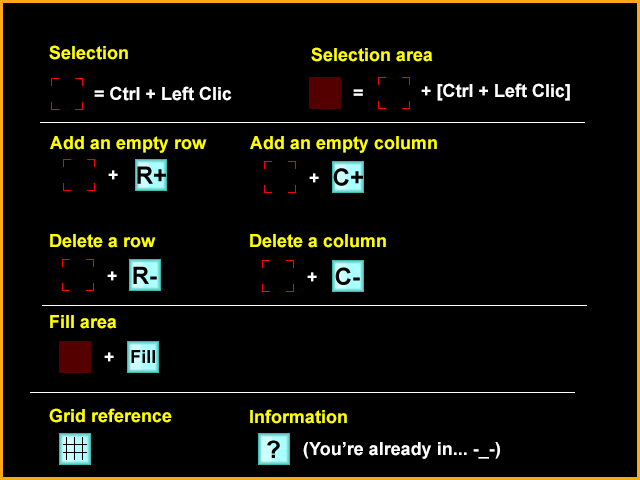
<style>
.page{position:relative;width:640px;height:480px;background:#000000}
.page>*{position:absolute;margin:0}
.t1{font:18px "Arial-BoldMT";color:#ffff00}
.t2{font:18px "Arial-BoldMT";color:#ffffff}
</style>
<div class="page">
<p class="t1" style="left:49px;top:45px;width:79px;height:15px">Selection</p>
<p class="t1" style="left:311px;top:47px;width:122px;height:15px">Selection area</p>
<p class="t2" style="left:94px;top:86px;width:138px;height:15px">= Ctrl + Left Clic</p>
<p class="t2" style="left:353px;top:89px;width:10px;height:7px">=</p>
<p class="t2" style="left:421px;top:83px;width:149px;height:18px">+ [Ctrl + Left Clic]</p>
<p class="t1" style="left:50px;top:136px;width:157px;height:17px">Add an empty row</p>
<p class="t1" style="left:250px;top:136px;width:187px;height:17px">Add an empty column</p>
<p class="t2" style="left:108px;top:170px;width:10px;height:10px">+</p>
<p class="t2" style="left:309px;top:173px;width:10px;height:10px">+</p>
<p class="t1" style="left:50px;top:234px;width:106px;height:14px">Delete a row</p>
<p class="t1" style="left:250px;top:234px;width:136px;height:14px">Delete a column</p>
<p class="t2" style="left:107px;top:271px;width:10px;height:10px">+</p>
<p class="t2" style="left:307px;top:272px;width:10px;height:10px">+</p>
<p class="t1" style="left:50px;top:315px;width:67px;height:14px">Fill area</p>
<p class="t2" style="left:104px;top:352px;width:10px;height:10px">+</p>
<p class="t1" style="left:49px;top:408px;width:123px;height:15px">Grid reference</p>
<p class="t1" style="left:250px;top:409px;width:97px;height:15px">Information</p>
<p class="t2" style="left:303px;top:442px;width:197px;height:17px">(You’re already in... -_-)</p>
</div>
